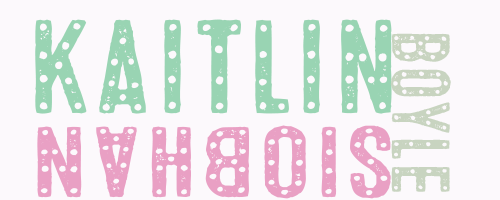
<style>
.page{position:relative;width:500px;height:200px;background:#fcf9fc}
.page>*{position:absolute;margin:0}
.t1{font:133px "SignyardOne";color:#99d4b3;scale:1.09 1}
.t2{font:82.4px "SignyardOne";color:#c8d4c0}
.t3{font:100px "SignyardOne";color:#e9a0c4;scale:1.26 1}
</style>
<div class="page">
<p class="t1" style="left:35px;top:19px;width:357px;height:95px">kaitlin</p>
<p class="t2" style="left:390px;top:33px;width:61px;height:159px;rotate:90deg">boyle</p>
<p class="t3" style="left:37px;top:125px;width:354px;height:74px;rotate:-180deg">siobhan</p>
</div>
